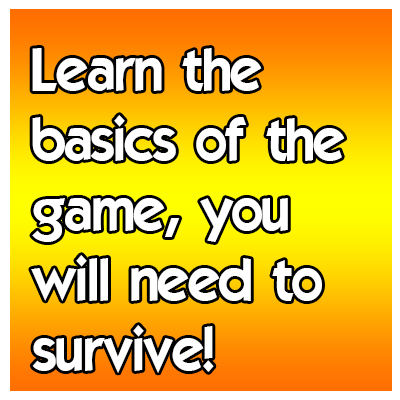
<style>
.page{position:relative;width:400px;height:400px;background:#ffffff}
.page>*{position:absolute;margin:0}
.t1{font:58.3px "ELEGANCE";color:#ffffff}
</style>
<div class="page">
<p class="t1" style="left:31px;top:48px;width:314px;height:325px">Learn the<br>basics of the<br>game, you<br>will need to <br>survive!</p>
</div>
